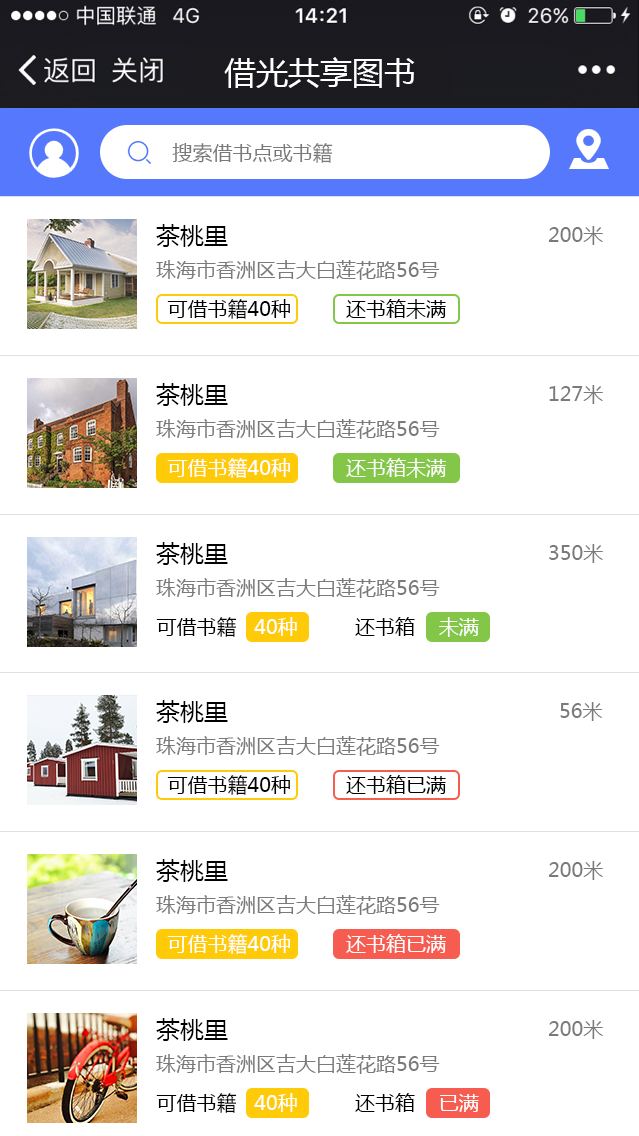
<style>
.page{position:relative;width:639px;height:1136px;background:#ffffff}
.page>*{position:absolute;margin:0}
.t1{font:20px "MicrosoftYaHei";color:#7a7a7a}
.t2{font:24px "MicrosoftYaHei";color:#000000}
.t3{font:20px "MicrosoftYaHei";color:#000000}
.t4{font:20px "MicrosoftYaHei";color:#ffffff}
.t5{font:20px "MicrosoftYaHei";color:#fefefe}
.t6{font:20px "MicrosoftYaHei";color:#010101}
</style>
<div class="page">
<p class="t1" style="left:172px;top:143px;width:161px;height:20px">搜索借书点或书籍</p>
<p class="t2" style="left:156px;top:224px;width:72px;height:23px">茶桃里</p>
<p class="t1" style="left:548px;top:226px;width:55px;height:19px">200米</p>
<p class="t1" style="left:156px;top:260px;width:284px;height:20px">珠海市香洲区吉大白莲花路56号</p>
<p class="t3" style="left:167px;top:299px;width:123px;height:20px">可借书籍40种</p>
<p class="t3" style="left:346px;top:299px;width:100px;height:20px">还书箱未满</p>
<p class="t2" style="left:156px;top:383px;width:72px;height:23px">茶桃里</p>
<p class="t1" style="left:549px;top:385px;width:54px;height:19px">127米</p>
<p class="t1" style="left:156px;top:419px;width:284px;height:20px">珠海市香洲区吉大白莲花路56号</p>
<p class="t4" style="left:167px;top:458px;width:123px;height:20px">可借书籍40种</p>
<p class="t5" style="left:346px;top:458px;width:100px;height:20px">还书箱未满</p>
<p class="t2" style="left:156px;top:542px;width:72px;height:23px">茶桃里</p>
<p class="t1" style="left:549px;top:544px;width:54px;height:19px">350米</p>
<p class="t1" style="left:156px;top:578px;width:284px;height:20px">珠海市香洲区吉大白莲花路56号</p>
<p class="t6" style="left:156px;top:617px;width:141px;height:20px">可借书籍   <span class="t4">40种</span></p>
<p class="t3" style="left:355px;top:617px;width:124px;height:20px">还书箱    <span class="t5">未满</span></p>
<p class="t2" style="left:156px;top:700px;width:72px;height:23px">茶桃里</p>
<p class="t1" style="left:560px;top:702px;width:43px;height:19px">56米</p>
<p class="t1" style="left:156px;top:736px;width:284px;height:20px">珠海市香洲区吉大白莲花路56号</p>
<p class="t3" style="left:167px;top:775px;width:123px;height:20px">可借书籍40种</p>
<p class="t3" style="left:346px;top:775px;width:100px;height:19px">还书箱已满</p>
<p class="t2" style="left:156px;top:859px;width:72px;height:23px">茶桃里</p>
<p class="t1" style="left:548px;top:861px;width:55px;height:19px">200米</p>
<p class="t1" style="left:156px;top:895px;width:284px;height:20px">珠海市香洲区吉大白莲花路56号</p>
<p class="t4" style="left:167px;top:934px;width:123px;height:20px">可借书籍40种</p>
<p class="t5" style="left:346px;top:934px;width:100px;height:19px">还书箱已满</p>
<p class="t2" style="left:156px;top:1018px;width:72px;height:23px">茶桃里</p>
<p class="t1" style="left:548px;top:1020px;width:55px;height:19px">200米</p>
<p class="t1" style="left:156px;top:1054px;width:284px;height:20px">珠海市香洲区吉大白莲花路56号</p>
<p class="t6" style="left:156px;top:1093px;width:141px;height:20px">可借书籍   <span class="t4">40种</span></p>
<p class="t3" style="left:355px;top:1093px;width:124px;height:19px">还书箱    <span class="t5">已满</span></p>
</div>
